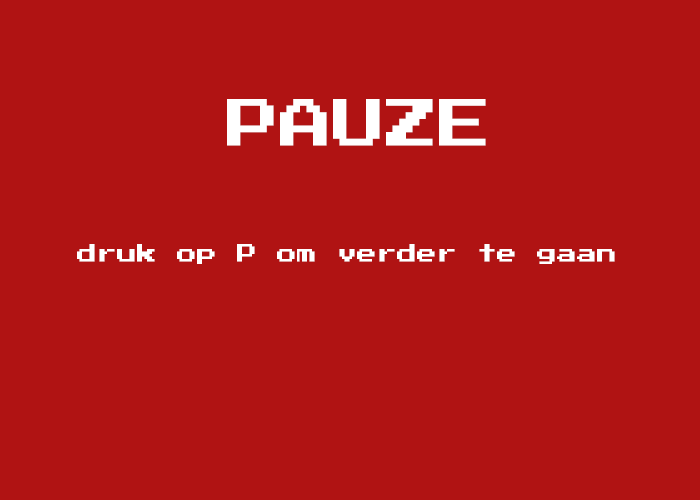
<style>
.page{position:relative;width:700px;height:500px;background:#b01313}
.page>*{position:absolute;margin:0}
.t1{font:53px "PressStart2P";color:#ffffff}
.t2{font:20px "PressStart2P";color:#ffffff}
</style>
<div class="page">
<p class="t1" style="left:227px;top:99px;width:259px;height:47px">PAUZE</p>
<p class="t2" style="left:77px;top:244px;width:538px;height:20px">druk op P om verder te gaan</p>
</div>
